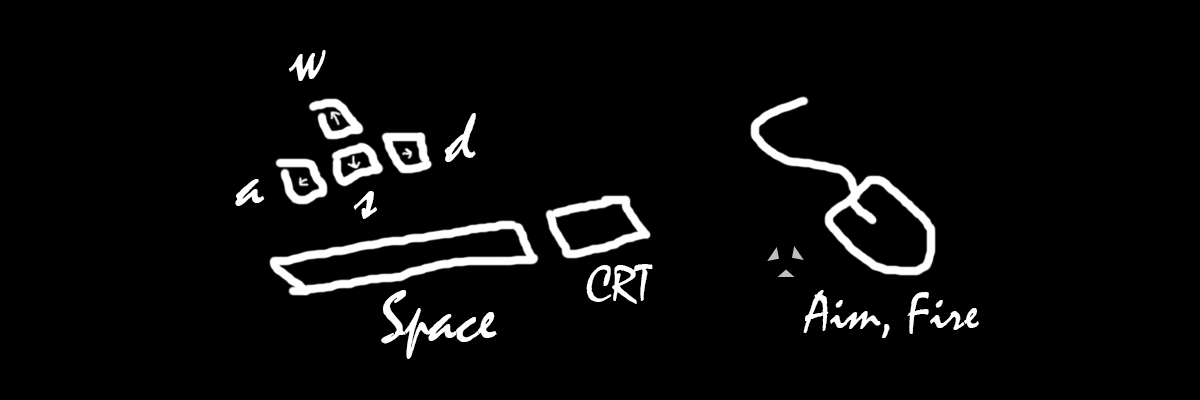
<style>
.page{position:relative;width:1200px;height:400px;background:#000000}
.page>*{position:absolute;margin:0}
.t1{font:73.1px "Mistral";color:#ffffff}
.t2{font:53.3px "Mistral";color:#ffffff}
.t3{font:71.7px "Mistral";color:#ffffff}
.t4{font:56px "Mistral";color:#ffffff}
</style>
<div class="page">
<p class="t1" style="left:288px;top:50px;width:38px;height:31px">w</p>
<p class="t1" style="left:444px;top:113px;width:32px;height:49px">d</p>
<p class="t1" style="left:235px;top:179px;width:30px;height:27px">a</p>
<p class="t1" style="left:353px;top:191px;width:24px;height:28px">s</p>
<p class="t2" style="left:586px;top:264px;width:67px;height:40px">CRT</p>
<p class="t3" style="left:381px;top:290px;width:116px;height:69px">Space</p>
<p class="t4" style="left:803px;top:290px;width:176px;height:48px">Aim, Fire</p>
</div>
